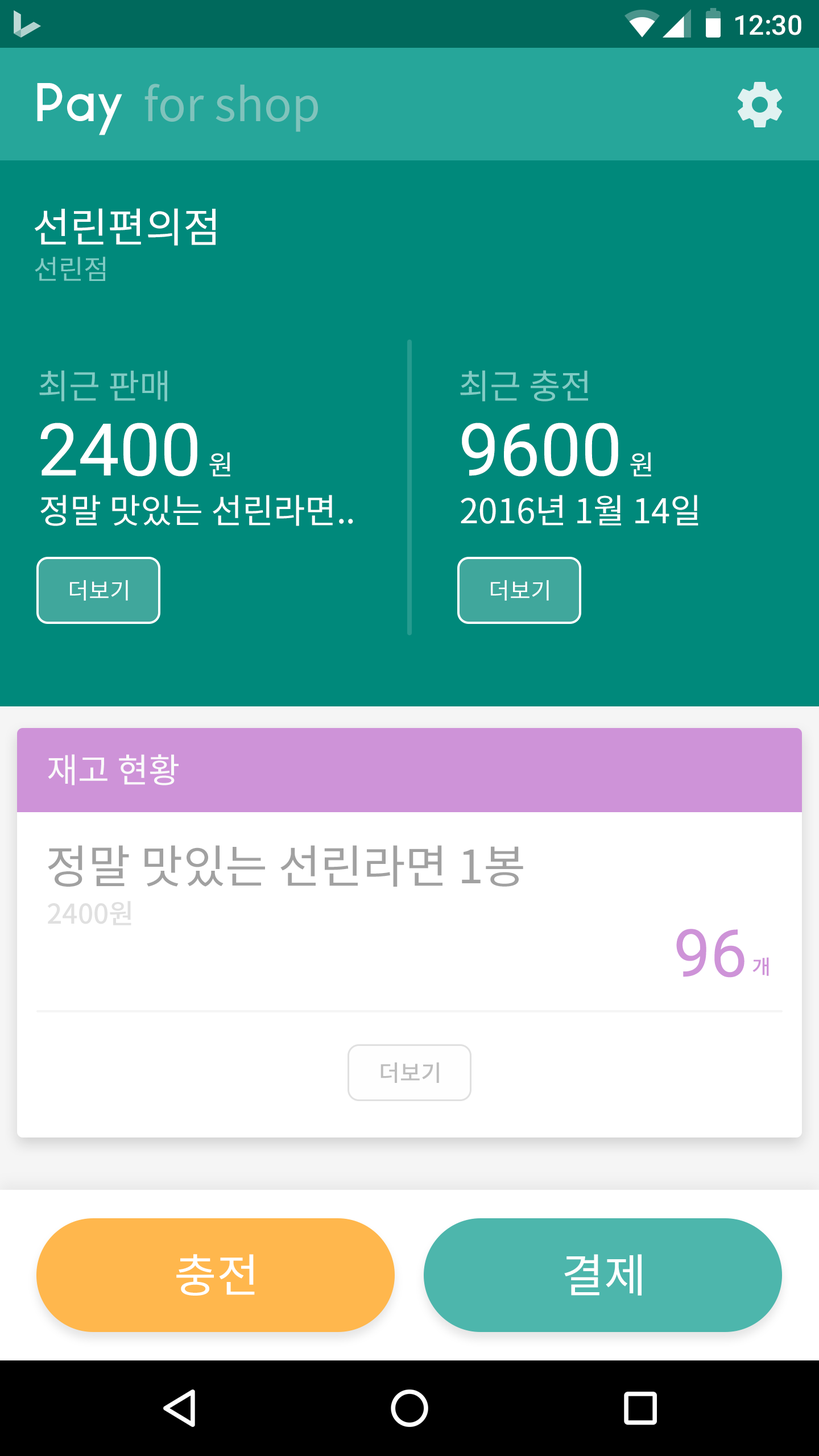
<style>
.page{position:relative;width:819px;height:1456px;background:#00897b}
.page>*{position:absolute;margin:0}
.t1{font:27.3px "Roboto-Medium";color:#ffffff}
.t2{font:54.6px "Ikaros";color:#ffffff}
.t3{font:46.1px "NotoSansCJKkr-Regular";color:#80c3bc}
.t4{font:40.9px "NotoSansCJKkr-Regular";color:#ffffff}
.t5{font:27.3px "NotoSansCJKkr-Regular";color:#80cbc4}
.t6{font:34.1px "NotoSansCJKkr-Regular";color:#80cbc4}
.t7{font:72.8px "Roboto-Regular";color:#ffffff}
.t8{font:27.3px "NotoSansCJKkr-Regular";color:#ffffff}
.t9{font:34.1px "NotoSansCJKkr-Regular";color:#ffffff}
.t10{font:22.7px "NotoSansCJKkr-Regular";color:#ffffff}
.t11{font:34.1px "NotoSansCJKkr-Regular";color:#fafafa}
.t12{font:46.1px "NotoSansCJKkr-Regular";color:#a1a1a1}
.t13{font:27.3px "NotoSansCJKkr-Medium";color:#e0e0e0}
.t14{font:66px "Roboto-Regular";color:#ce93d8}
.t15{font:20.5px "NotoSansCJKkr-Medium";color:#ce93d8}
.t16{font:22.7px "NotoSansCJKkr-Medium";color:#bdbdbd}
.t17{font:46.1px "NotoSansCJKkr-Regular";color:#ffffff}
</style>
<div class="page">
<p class="t1" style="left:735px;top:15px;width:66px;height:20px">12:30</p>
<p class="t2" style="left:37px;top:83px;width:85px;height:52px">Pay</p>
<p class="t3" style="left:144px;top:84px;width:174px;height:48px">for shop</p>
<p class="t4" style="left:34px;top:208px;width:182px;height:38px">선린편의점</p>
<p class="t5" style="left:35px;top:257px;width:70px;height:24px">선린점</p>
<p class="t6" style="left:39px;top:370px;width:128px;height:32px">최근 판매</p>
<p class="t6" style="left:460px;top:370px;width:128px;height:32px">최근 충전</p>
<p class="t7" style="left:40px;top:423px;width:157px;height:54px">2400</p>
<p class="t7" style="left:462px;top:423px;width:156px;height:54px">9600</p>
<p class="t8" style="left:209px;top:452px;width:21px;height:25px">원</p>
<p class="t8" style="left:630px;top:452px;width:21px;height:25px">원</p>
<p class="t9" style="left:40px;top:495px;width:313px;height:31px">정말 맛있는 선린라면..</p>
<p class="t9" style="left:461px;top:495px;width:237px;height:31px">2016년 1월 14일</p>
<p class="t10" style="left:70px;top:580px;width:58px;height:21px">더보기</p>
<p class="t10" style="left:491px;top:580px;width:58px;height:21px">더보기</p>
<p class="t11" style="left:48px;top:754px;width:131px;height:31px">재고 현황</p>
<p class="t12" style="left:48px;top:845px;width:475px;height:42px">정말 맛있는 선린라면 1봉</p>
<p class="t13" style="left:48px;top:901px;width:83px;height:24px">2400원</p>
<p class="t14" style="left:676px;top:929px;width:68px;height:49px">96</p>
<p class="t15" style="left:752px;top:957px;width:17px;height:19px">개</p>
<p class="t16" style="left:380px;top:1062px;width:59px;height:21px">더보기</p>
<p class="t17" style="left:176px;top:1254px;width:79px;height:42px">충전</p>
<p class="t17" style="left:564px;top:1254px;width:78px;height:42px">결제</p>
</div>
